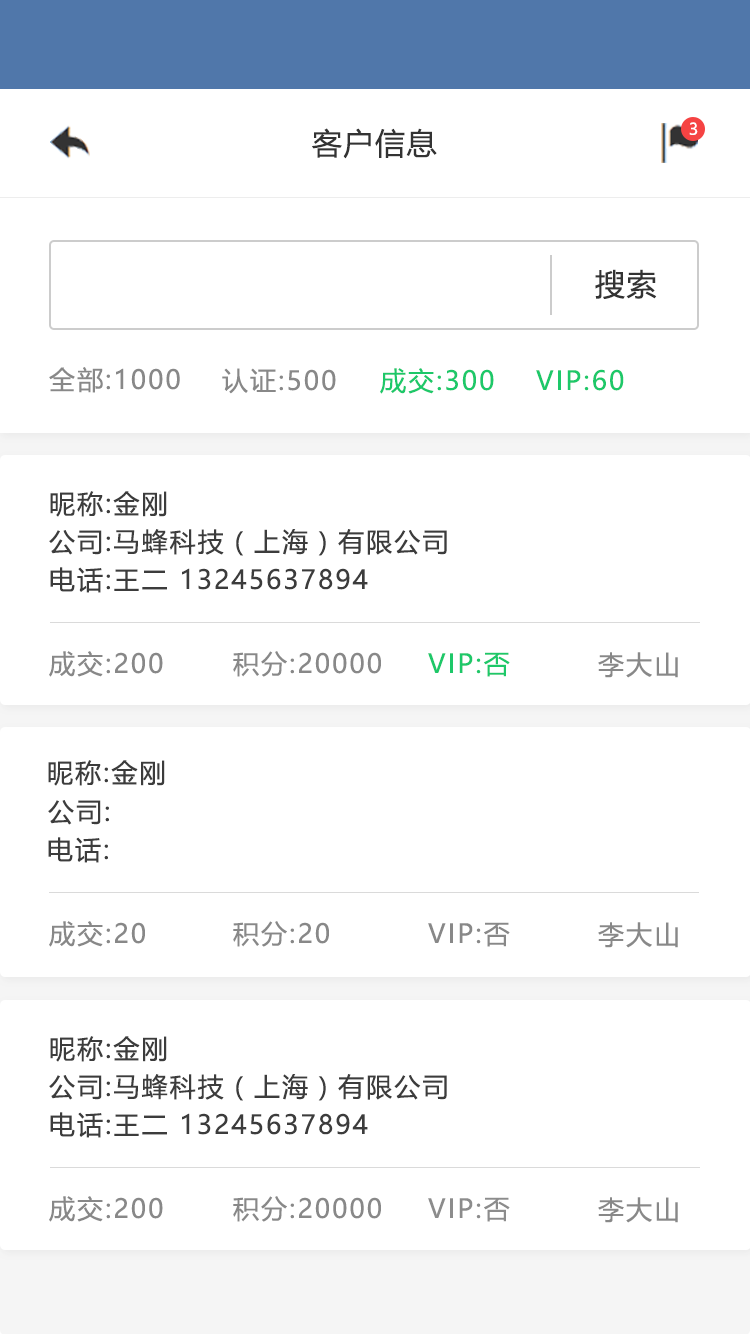
<style>
.page{position:relative;width:750px;height:1334px;background:#ffffff}
.page>*{position:absolute;margin:0}
.t1{font:16px "MicrosoftYaHeiUI";color:#ffffff}
.t2{font:30px "MicrosoftYaHeiUI";letter-spacing:0.05em;color:#333333}
.t3{font:26px "MicrosoftYaHeiUI";letter-spacing:0.08em;color:#888888}
.t4{font:26px "MicrosoftYaHeiUI";letter-spacing:0.08em;color:#1dc869}
.t5{font:26px "MicrosoftYaHeiUI";letter-spacing:0.08em;color:#3c3c3c}
.t6{font:26px "MicrosoftYaHeiUI";letter-spacing:0.08em;color:#8c8c8c}
</style>
<div class="page">
<p class="t1" style="left:689px;top:122px;width:9px;height:13px">3</p>
<p class="t2" style="left:312px;top:128px;width:125px;height:31px">客户信息</p>
<p class="t2" style="left:595px;top:269px;width:62px;height:30px">搜索</p>
<p class="t3" style="left:49px;top:367px;width:131px;height:26px">全部:1000</p>
<p class="t3" style="left:222px;top:368px;width:114px;height:26px">认证:500</p>
<p class="t4" style="left:380px;top:368px;width:114px;height:26px">成交:300</p>
<p class="t4" style="left:536px;top:369px;width:88px;height:22px">VIP:60</p>
<p class="t5" style="left:50px;top:491px;width:117px;height:26px">昵称:金刚</p>
<p class="t5" style="left:49px;top:529px;width:398px;height:27px">公司:马蜂科技（上海）有限公司</p>
<p class="t5" style="left:50px;top:567px;width:318px;height:26px">电话:王二 13245637894</p>
<p class="t3" style="left:49px;top:651px;width:114px;height:26px">成交:200</p>
<p class="t3" style="left:233px;top:651px;width:148px;height:26px">积分:20000</p>
<p class="t4" style="left:428px;top:652px;width:82px;height:25px">VIP:否</p>
<p class="t3" style="left:598px;top:652px;width:80px;height:26px">李大山</p>
<p class="t5" style="left:48px;top:760px;width:117px;height:26px">昵称:金刚</p>
<p class="t5" style="left:48px;top:800px;width:61px;height:25px">公司:</p>
<p class="t5" style="left:48px;top:837px;width:60px;height:26px">电话:</p>
<p class="t3" style="left:49px;top:921px;width:96px;height:26px">成交:20</p>
<p class="t3" style="left:233px;top:921px;width:96px;height:26px">积分:20</p>
<p class="t3" style="left:428px;top:922px;width:82px;height:25px">VIP:否</p>
<p class="t3" style="left:598px;top:922px;width:80px;height:26px">李大山</p>
<p class="t5" style="left:50px;top:1036px;width:117px;height:26px">昵称:金刚</p>
<p class="t5" style="left:49px;top:1074px;width:398px;height:27px">公司:马蜂科技（上海）有限公司</p>
<p class="t5" style="left:50px;top:1112px;width:318px;height:26px">电话:王二 13245637894</p>
<p class="t3" style="left:49px;top:1196px;width:114px;height:26px">成交:200</p>
<p class="t3" style="left:233px;top:1196px;width:148px;height:26px">积分:20000</p>
<p class="t6" style="left:428px;top:1197px;width:82px;height:25px">VIP:否</p>
<p class="t3" style="left:598px;top:1197px;width:80px;height:26px">李大山</p>
</div>
